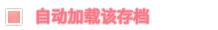
<style>
.page{position:relative;width:218px;height:30px;background:#ffffff}
.page>*{position:absolute;margin:0}
.t1{font:16px "SourceHanSansSC-Regular";color:#f97887;font-weight:bold}
</style>
<div class="page">
<p class="t1" style="left:37px;top:8px;width:112px;height:16px">自动加载该存档</p>
</div>
